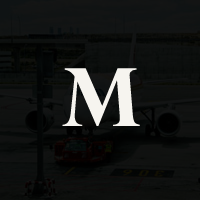
<style>
.page{position:relative;width:200px;height:200px}
.page>*{position:absolute;margin:0}
.t1{font:80px "PerpetuaTitlingMT-Bold";color:#f6f4ef}
</style>
<div class="page">
<p class="t1" style="left:62px;top:68px;width:78px;height:58px">M</p>
</div>
